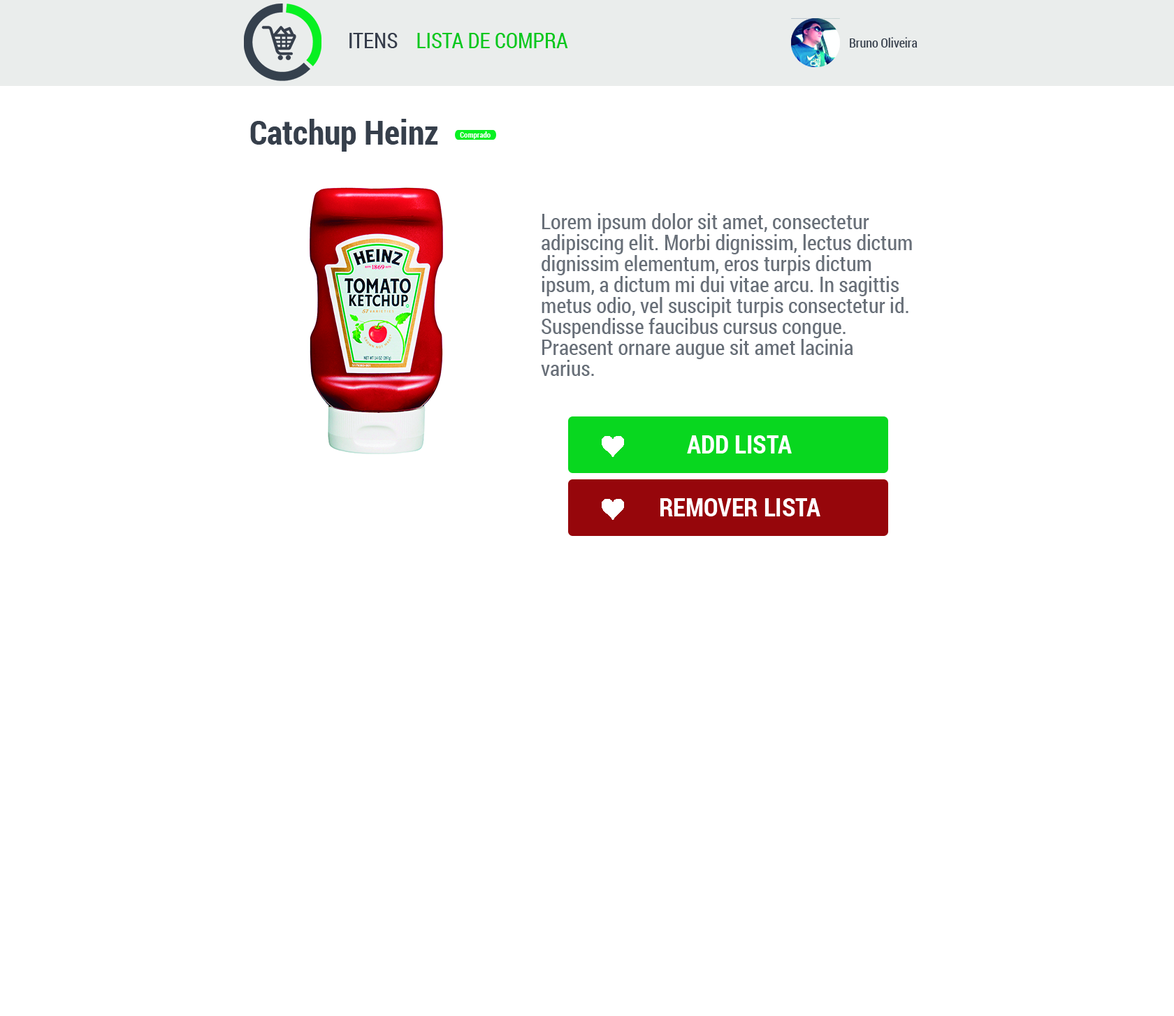
<style>
.page{position:relative;width:1174px;height:1016px;background:#ffffff}
.page>*{position:absolute;margin:0}
.t1{font:21px "RobotoCondensed-Regular";color:#0ac71e}
.t2{font:21px "RobotoCondensed-Regular";color:#363d4b}
.t3{font:12.6px "RobotoCondensed-Regular";color:#363f4b}
.t4{font:33.5px "RobotoCondensed-Bold";color:#363f4b}
.t5{font:7.7px "RobotoCondensed-Bold";color:#ffffff}
.t6{font:21px/21px "RobotoCondensed-Regular";color:#686f78}
.t7{font:25.1px "RobotoCondensed-Bold";color:#ffffff}
</style>
<div class="page">
<p class="t1" style="left:349px;top:33px;width:219px;height:15px"><span class="t2">ITENS    </span>LISTA DE COMPRA</p>
<p class="t3" style="left:850px;top:37px;width:67px;height:11px">Bruno Oliveira</p>
<p class="t4" style="left:250px;top:119px;width:188px;height:33px">Catchup Heinz</p>
<p class="t5" style="left:460px;top:131px;width:30px;height:8px">Comprado</p>
<p class="t6" style="left:541px;top:213px;width:371px;height:163px">Lorem ipsum dolor sit amet, consectetur <br>adipiscing elit. Morbi dignissim, lectus dictum <br>dignissim elementum, eros turpis dictum <br>ipsum, a dictum mi dui vitae arcu. In sagittis <br>metus odio, vel suscipit turpis consectetur id. <br>Suspendisse faucibus cursus congue. <br>Praesent ornare augue sit amet lacinia <br>varius.</p>
<p class="t7" style="left:687px;top:435px;width:105px;height:18px">ADD LISTA</p>
<p class="t7" style="left:660px;top:498px;width:160px;height:18px">REMOVER LISTA</p>
</div>
